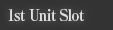
<style>
.page{position:relative;width:113px;height:30px;background:#333333}
.page>*{position:absolute;margin:0}
.t1{font:16px "RyuminPro-ExBold";letter-spacing:-0.04em;color:#dfdfdf;scale:0.9 1}
</style>
<div class="page">
<p class="t1" style="left:8px;top:8px;width:76px;height:14px">1st Unit Slot</p>
</div>
